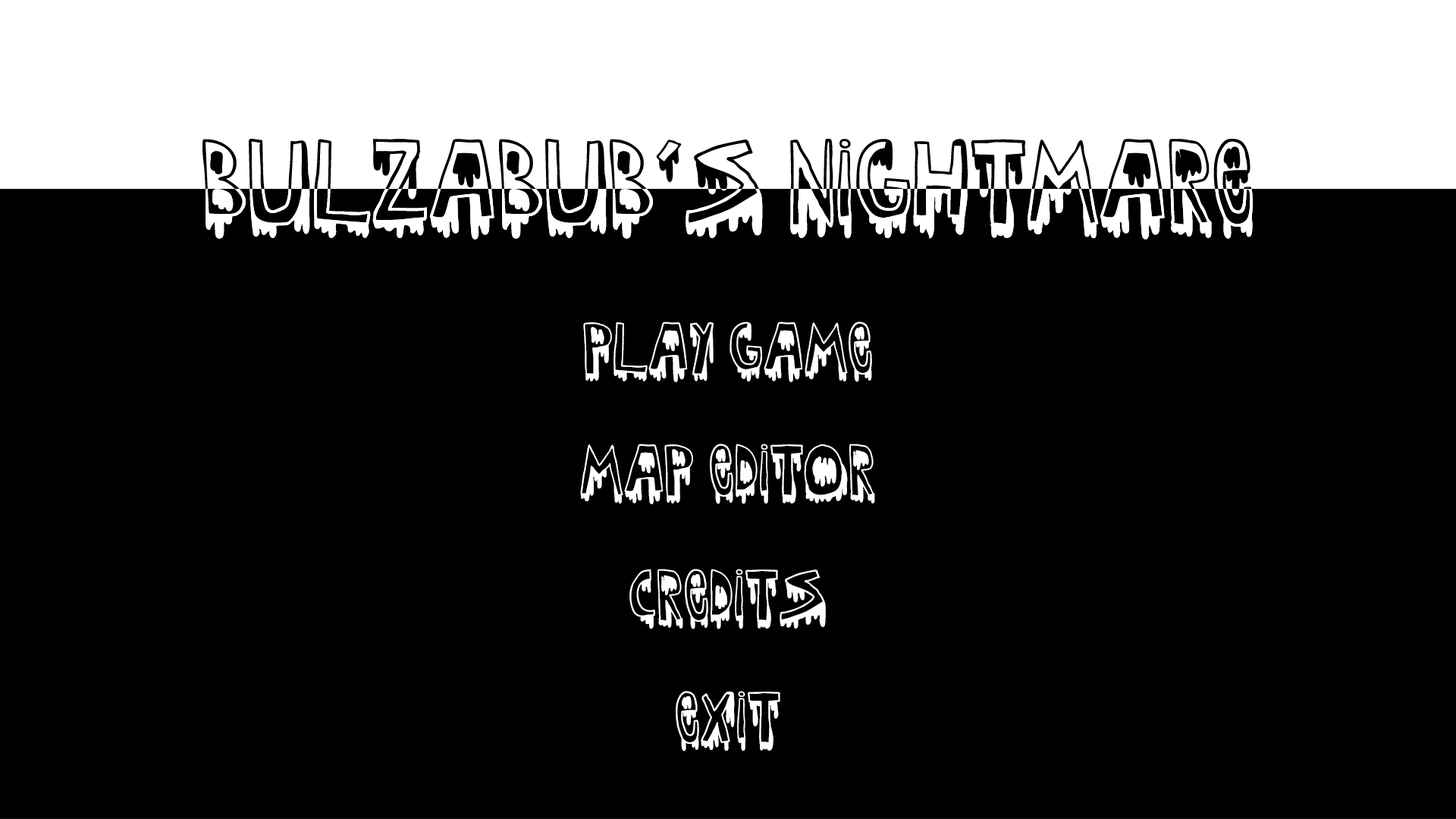
<style>
.page{position:relative;width:1456px;height:819px;background:#000000}
.page>*{position:absolute;margin:0}
.t1{font:99.6px "Kidnightmare";color:#ffffff}
</style>
<div class="page">
<p class="t1" style="left:583px;top:322px;width:289px;height:60px">Play Game</p>
<p class="t1" style="left:580px;top:444px;width:295px;height:60px">Map Editor</p>
<p class="t1" style="left:629px;top:569px;width:197px;height:60px">Credits</p>
<p class="t1" style="left:676px;top:691px;width:104px;height:60px">exit</p>
</div>
